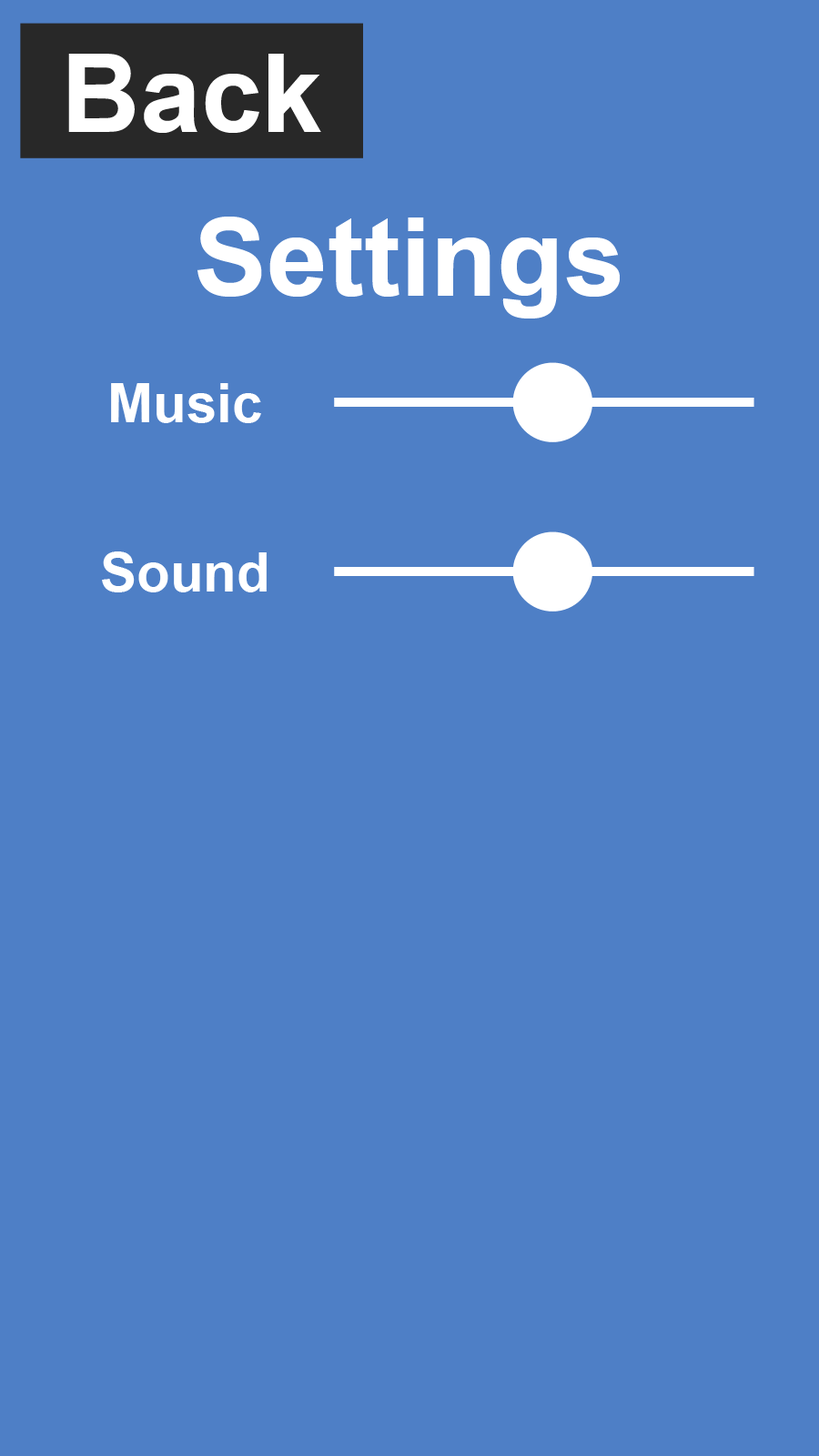
<style>
.page{position:relative;width:819px;height:1456px;background:#4e7fc6}
.page>*{position:absolute;margin:0}
.t1{font:109.2px "Arial-BoldMT";color:#ffffff}
.t2{font:54.6px "Arial-BoldMT";color:#ffffff}
</style>
<div class="page">
<p class="t1" style="left:68px;top:54px;width:253px;height:79px">Back</p>
<p class="t1" style="left:197px;top:217px;width:423px;height:101px">Settings</p>
<p class="t2" style="left:111px;top:383px;width:150px;height:40px">Music</p>
<p class="t2" style="left:102px;top:551px;width:165px;height:41px">Sound</p>
</div>
